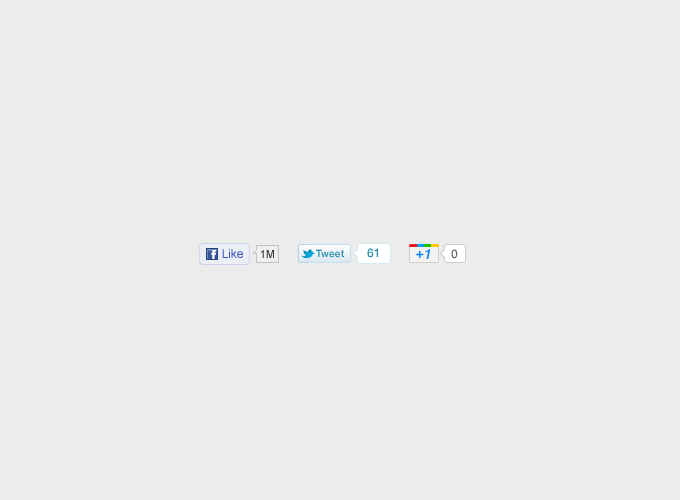
<style>
.page{position:relative;width:680px;height:500px;background:#ececec}
.page>*{position:absolute;margin:0}
.t1{font:12px "ArialMT";letter-spacing:-0.01em;color:#3c54bd}
.t2{font:11px "ArialMT";letter-spacing:-0.01em;color:#323232}
.t3{font:10px "HelveticaNeue-Medium";letter-spacing:0.025em;color:#228aa8}
.t4{font:12px "HelveticaNeue-Medium";letter-spacing:0.025em;color:#228aa8}
.t5{font:14px "HelveticaNeue-MediumItalic";letter-spacing:0.025em;color:#0883f5}
.t6{font:12px "HelveticaNeue-Medium";letter-spacing:0.025em;color:#666666}
</style>
<div class="page">
<p class="t1" style="left:222px;top:249px;width:21px;height:9px">Like</p>
<p class="t2" style="left:261px;top:250px;width:13px;height:8px">1M</p>
<p class="t3" style="left:316px;top:249px;width:28px;height:9px">Tweet</p>
<p class="t4" style="left:367px;top:248px;width:11px;height:10px">61</p>
<p class="t5" style="left:416px;top:251px;width:8px;height:7px">+</p>
<p class="t5" style="left:425px;top:249px;width:6px;height:10px">1</p>
<p class="t6" style="left:451px;top:249px;width:7px;height:10px">0</p>
</div>
